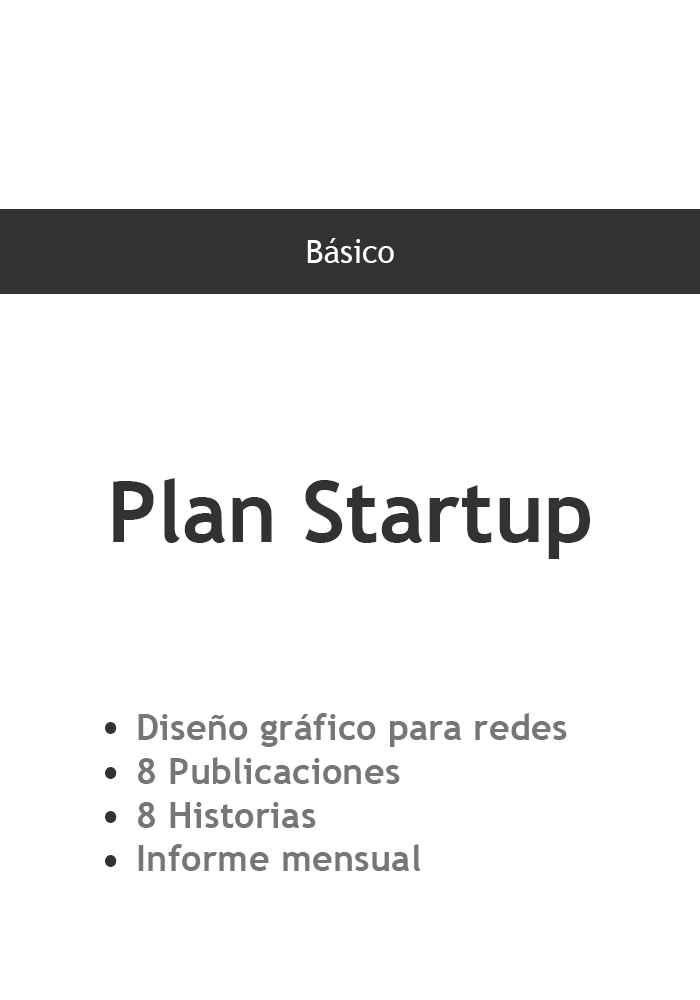
<style>
.page{position:relative;width:700px;height:1000px;background:#ffffff}
.page>*{position:absolute;margin:0}
.t1{font:31.8px "TrebuchetMS";color:#ffffff}
.t2{font:84.7px "TrebuchetMS-Bold";color:#333131}
.t3{font:36.4px "TrebuchetMS-Bold";color:#777676}
.t4{font:95.2px "MyriadPro-Regular";color:#333131}
</style>
<div class="page">
<p class="t1" style="left:307px;top:238px;width:87px;height:25px">Básico</p>
<p class="t2" style="left:113px;top:478px;width:477px;height:81px">Plan Startup</p>
<p class="t3" style="left:138px;top:713px;width:429px;height:158px">Diseño gráfico para redes<br>8 Publicaciones<br>8 Historias<br>Informe mensual</p>
<p class="t4" style="left:105px;top:722px;width:12px;height:12px">.</p>
<p class="t4" style="left:105px;top:767px;width:12px;height:12px">.</p>
<p class="t4" style="left:105px;top:811px;width:12px;height:12px">.</p>
<p class="t4" style="left:105px;top:855px;width:12px;height:12px">.</p>
</div>
